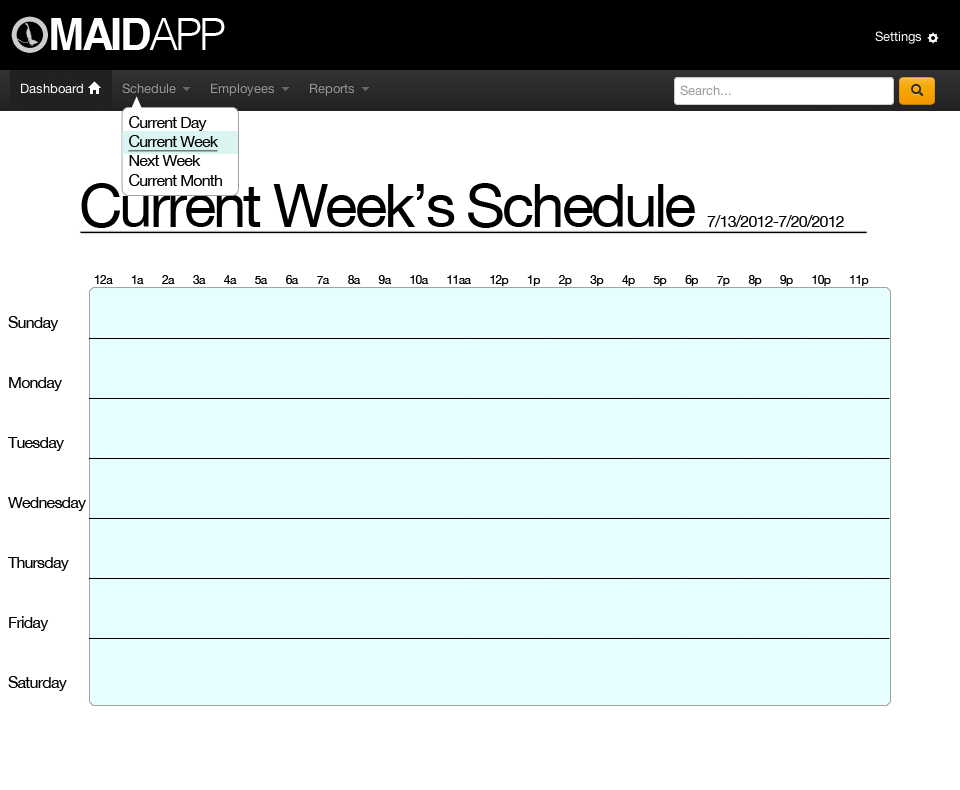
<style>
.page{position:relative;width:960px;height:790px;background:#e7feff}
.page>*{position:absolute;margin:0}
.t1{font:16px "HelveticaNeue";letter-spacing:-0.05em;color:#000000}
.t2{font:16px "HelveticaNeue";letter-spacing:-0.05em;color:#000000;text-decoration:underline}
.t3{font:60px "HelveticaNeue";letter-spacing:-0.05em;color:#000000}
.t4{font:12px "HelveticaNeue";letter-spacing:-0.05em;color:#000000}
.t5{font:12px "HelveticaNeue";letter-spacing:-0.05em;color:#ffffff}
.t6{font:16px/30px "HelveticaNeue";letter-spacing:-0.05em;color:#000000}
.t7{font:16px/29px "HelveticaNeue";letter-spacing:-0.05em;color:#000000}
.t8{font:16px/30px "HelveticaNeue";letter-spacing:-0.04em;color:#000000}
.t9{font:16px/30px "HelveticaNeue";letter-spacing:-0.03em;color:#000000}
.t10{font:16px/30px "HelveticaNeue";letter-spacing:-0.044em;color:#000000}
</style>
<div class="page">
<p class="t1" style="left:128px;top:116px;width:94px;height:70px;text-align:justify">Current Day<br><span class="t2">Current Week<br></span>Next Week<br>Current Month</p>
<p class="t3" style="left:81px;top:183px;width:614px;height:45px">Current Week’s Schedule</p>
<p class="t1" style="left:707px;top:215px;width:137px;height:12px">7/13/2012-7/20/2012</p>
<p class="t4" style="left:94px;top:275px;width:800px;height:11px">12a 1a 2a 3a 4a 5a 6a 7a 8a 9a 10a 11aa 12p 1p 2p 3p 4p 5p 6p 7p 8p 9p 10p 11p <span class="t5">_</span></p>
<p class="t6" style="left:7px;top:316px;width:79px;height:375px;text-align:justify">Sunday<br><br>Monday<br><br>Tuesday<br><br>Wednesday<br><br>Thursday<br><br>Friday<br><br>Saturday</p>
<p class="t6" style="left:88px;top:338px;width:802px;height:301px;text-align:justify"><span class="t7"><br></span>______________________________________________________________________<span class="t8">________________________________</span><span class="t9">_____</span><span class="t10">__<br><br></span>______________________________________________________________________<span class="t8">________________________________</span><span class="t9">_____</span><span class="t10">__<br><br></span>______________________________________________________________________<span class="t8">________________________________</span><span class="t9">_____</span><span class="t10">__<br><br></span>______________________________________________________________________<span class="t8">________________________________</span><span class="t9">_____</span><span class="t10">__<br><br></span>______________________________________________________________________<span class="t8">________________________________</span><span class="t9">_____</span><span class="t10">__<br><br></span>______________________________________________________________________<span class="t8">________________________________</span><span class="t9">_____</span><span class="t10">__</span></p>
</div>
